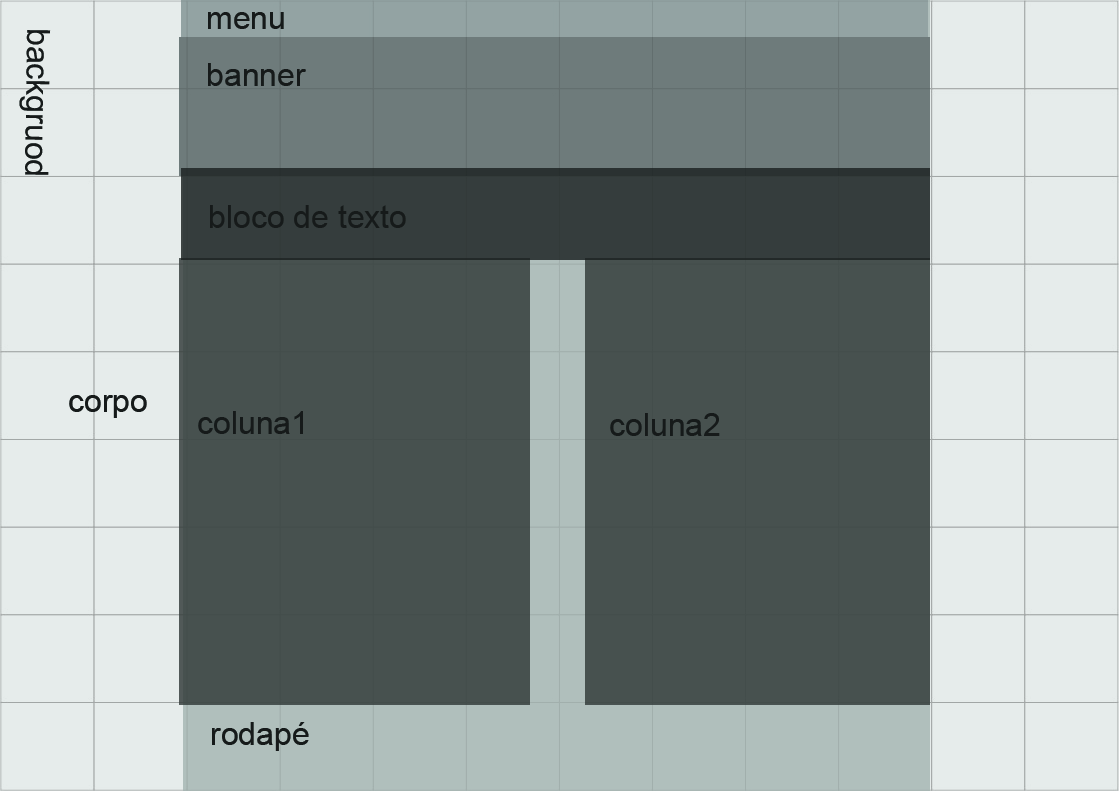
<style>
.page{position:relative;width:1119px;height:791px;background:#47514f}
.page>*{position:absolute;margin:0}
.t1{font:32px "ArialMT";color:#161b1a}
</style>
<div class="page">
<p class="t1" style="left:208px;top:12px;width:76px;height:17px">menu</p>
<p class="t1" style="left:19px;top:30px;width:32px;height:145px;rotate:91deg">backgruod</p>
<p class="t1" style="left:208px;top:63px;width:98px;height:23px">banner</p>
<p class="t1" style="left:210px;top:205px;width:196px;height:23px">bloco de texto</p>
<p class="t1" style="left:69px;top:395px;width:78px;height:23px">corpo</p>
<p class="t1" style="left:198px;top:411px;width:105px;height:23px">coluna1</p>
<p class="t1" style="left:610px;top:413px;width:110px;height:23px">coluna2</p>
<p class="t1" style="left:212px;top:722px;width:97px;height:29px">rodapé</p>
</div>
